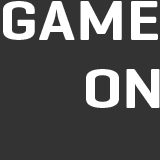
<style>
.page{position:relative;width:160px;height:160px;background:#333333}
.page>*{position:absolute;margin:0}
.t1{font:57px "Geogrotesque-SemiBold";color:#ffffff;scale:1.18 1}
</style>
<div class="page">
<p class="t1" style="left:3px;top:1px;width:157px;height:107px">GAME<br>    ON</p>
</div>
